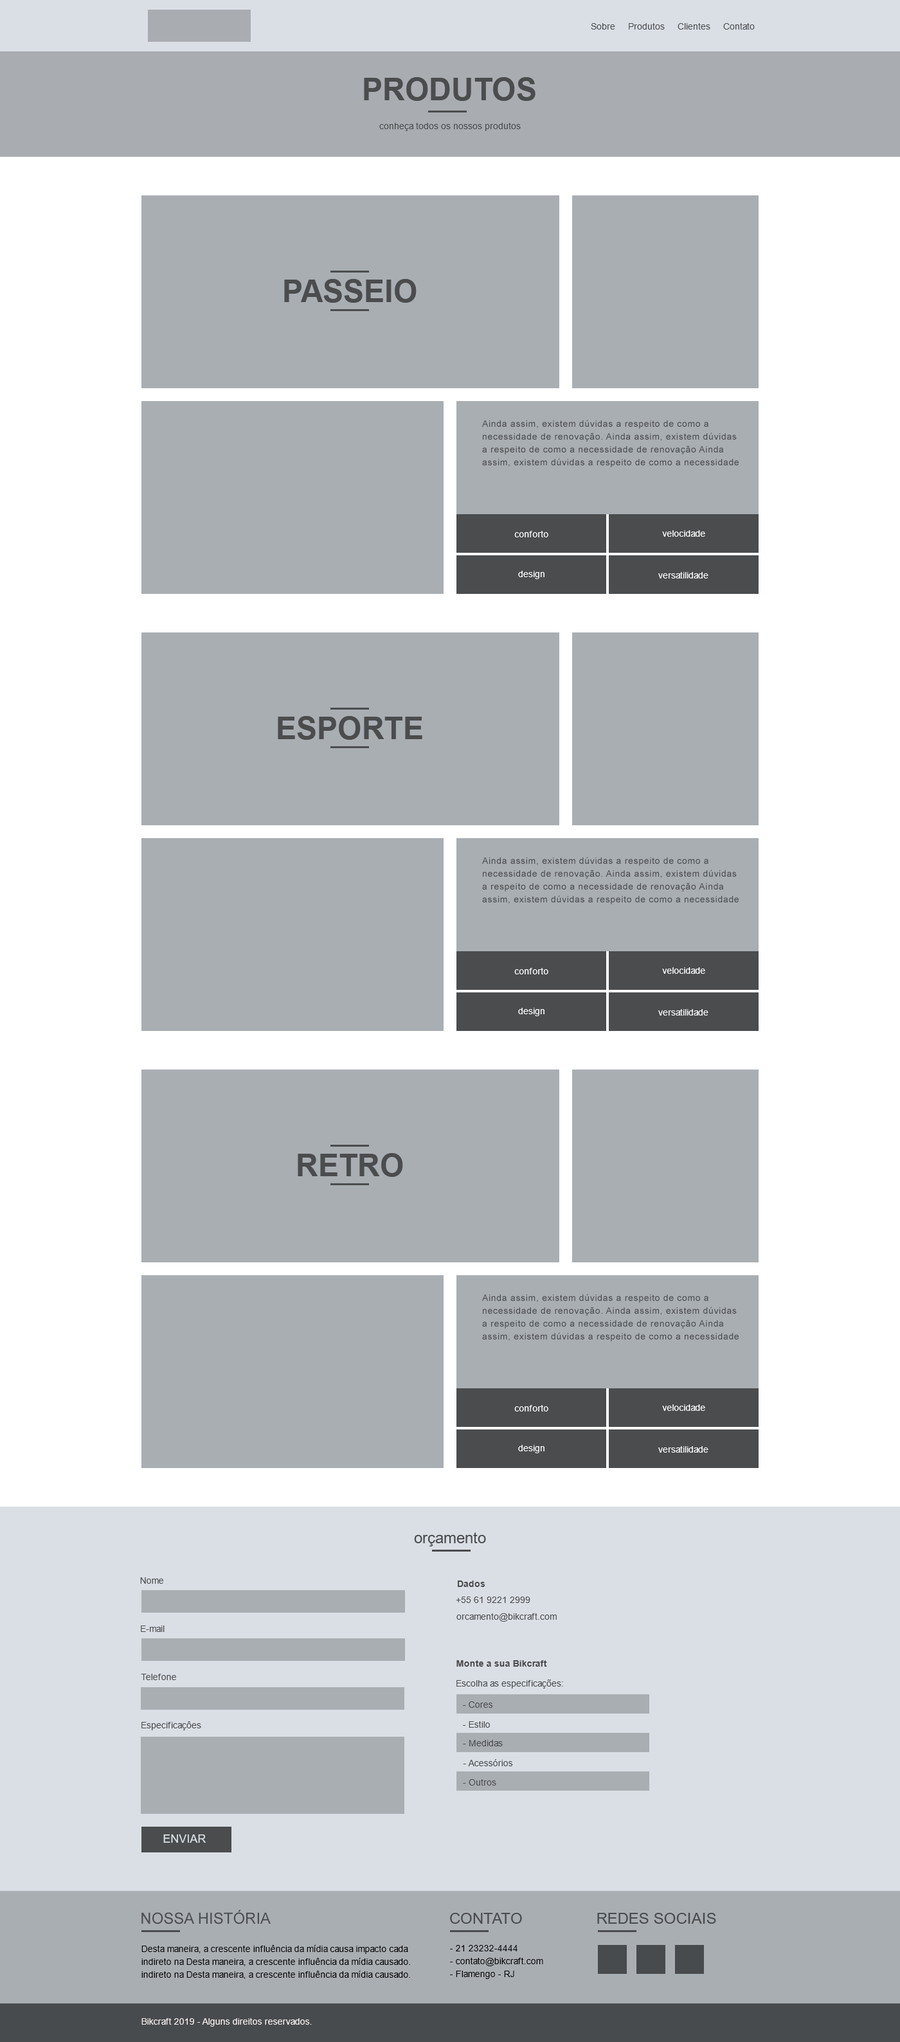
<style>
.page{position:relative;width:900px;height:2042px;background:#a9aeb3}
.page>*{position:absolute;margin:0}
.t1{font:9px "ArialMT";color:#4a4c4e}
.t2{font:30.9px "Arial-BoldMT";color:#4a4c4e;text-transform:uppercase}
.t3{font:9px/12.9px "ArialMT";letter-spacing:0.05em;color:#4a4c4e}
.t4{font:9px "ArialMT";color:#fefefe}
.t5{font:9px "ArialMT";color:#ffffff}
.t6{font:15.4px "ArialMT";color:#4a4c4e}
.t7{font:9px "Arial-BoldMT";color:#4a4c4e}
.t8{font:11.6px "ArialMT";color:#d9e0e6}
.t9{font:9px/12.9px "ArialMT";color:#000000}
.t10{font:9px "ArialMT";color:#f9f0f0}
</style>
<div class="page">
<p class="t1" style="left:591px;top:23px;width:164px;height:7px">Sobre     Produtos     Clientes     Contato</p>
<p class="t2" style="left:364px;top:77px;width:172px;height:24px">PRODUTOS</p>
<p class="t1" style="left:379px;top:123px;width:142px;height:8px">conheça todos os nossos produtos</p>
<p class="t2" style="left:284px;top:279px;width:133px;height:24px">PASSEIO</p>
<p class="t3" style="left:482px;top:420px;width:257px;height:47px">Ainda assim, existem dúvidas a respeito de como a necessidade de renovação. Ainda assim, existem dúvidas a respeito de como a necessidade de renovação Ainda assim, existem dúvidas a respeito de como a necessidade de renovação.</p>
<p class="t4" style="left:514px;top:531px;width:34px;height:6px">conforto</p>
<p class="t5" style="left:662px;top:530px;width:43px;height:7px">velocidade</p>
<p class="t5" style="left:518px;top:571px;width:26px;height:8px">design</p>
<p class="t5" style="left:658px;top:572px;width:50px;height:7px">versatilidade</p>
<p class="t2" style="left:278px;top:716px;width:144px;height:24px">EsPORTE</p>
<p class="t3" style="left:482px;top:857px;width:257px;height:48px">Ainda assim, existem dúvidas a respeito de como a necessidade de renovação. Ainda assim, existem dúvidas a respeito de como a necessidade de renovação Ainda assim, existem dúvidas a respeito de como a necessidade de renovação.</p>
<p class="t4" style="left:514px;top:968px;width:34px;height:7px">conforto</p>
<p class="t5" style="left:662px;top:968px;width:43px;height:6px">velocidade</p>
<p class="t5" style="left:518px;top:1008px;width:26px;height:8px">design</p>
<p class="t5" style="left:658px;top:1009px;width:50px;height:7px">versatilidade</p>
<p class="t2" style="left:298px;top:1153px;width:105px;height:24px">RETRO</p>
<p class="t3" style="left:482px;top:1294px;width:257px;height:48px">Ainda assim, existem dúvidas a respeito de como a necessidade de renovação. Ainda assim, existem dúvidas a respeito de como a necessidade de renovação Ainda assim, existem dúvidas a respeito de como a necessidade de renovação.</p>
<p class="t4" style="left:514px;top:1405px;width:34px;height:7px">conforto</p>
<p class="t5" style="left:662px;top:1405px;width:43px;height:6px">velocidade</p>
<p class="t5" style="left:518px;top:1445px;width:26px;height:9px">design</p>
<p class="t5" style="left:658px;top:1446px;width:50px;height:7px">versatilidade</p>
<p class="t6" style="left:414px;top:1533px;width:72px;height:14px">orçamento</p>
<p class="t1" style="left:140px;top:1578px;width:23px;height:6px">Nome</p>
<p class="t7" style="left:458px;top:1581px;width:27px;height:6px">Dados</p>
<p class="t1" style="left:456px;top:1597px;width:74px;height:6px">+55 61 9221 2999</p>
<p class="t1" style="left:456px;top:1614px;width:101px;height:8px">orcamento@bikcraft.com</p>
<p class="t1" style="left:141px;top:1626px;width:24px;height:6px">E-mail</p>
<p class="t7" style="left:456px;top:1661px;width:91px;height:6px">Monte a sua Bikcraft</p>
<p class="t1" style="left:141px;top:1674px;width:35px;height:6px">Telefone</p>
<p class="t1" style="left:456px;top:1680px;width:107px;height:9px">Escolha as especificações:</p>
<p class="t1" style="left:463px;top:1702px;width:30px;height:6px">- Cores</p>
<p class="t1" style="left:141px;top:1722px;width:60px;height:9px">Especificaçôes</p>
<p class="t1" style="left:463px;top:1722px;width:27px;height:6px">- Estilo</p>
<p class="t1" style="left:463px;top:1740px;width:40px;height:7px">- Medidas</p>
<p class="t1" style="left:463px;top:1760px;width:50px;height:7px">- Acessórios</p>
<p class="t1" style="left:463px;top:1779px;width:33px;height:7px">- Outros</p>
<p class="t8" style="left:163px;top:1835px;width:43px;height:8px">ENVIAR</p>
<p class="t6" style="left:141px;top:1910px;width:130px;height:15px">NOSSA HISTÓRIA</p>
<p class="t6" style="left:450px;top:1913px;width:72px;height:11px">CONTATO</p>
<p class="t6" style="left:597px;top:1913px;width:119px;height:11px">REDES SOCIAIS</p>
<p class="t9" style="left:141px;top:1945px;width:269px;height:34px">Desta maneira, a crescente influência da mídia causa impacto cada<br>indireto na Desta maneira, a crescente influência da mídia causado. <br>indireto na Desta maneira, a crescente influência da mídia causado.</p>
<p class="t9" style="left:450px;top:1945px;width:93px;height:34px">- 21 23232-4444<br>- contato@bikcraft.com<br>- Flamengo - RJ</p>
<p class="t10" style="left:141px;top:2019px;width:171px;height:8px">Bikcraft 2019 - Alguns direitos reservados.</p>
</div>
